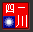
<style>
.page{position:relative;width:33px;height:32px;background:#f20000}
.page>*{position:absolute;margin:0}
.t1{font:10.4px "SimSun";color:#ffffff}
.t2{font:11.7px "SimSun";color:#ffffff}
</style>
<div class="page">
<p class="t1" style="left:6px;top:4px;width:19px;height:9px">四一</p>
<p class="t2" style="left:16px;top:15px;width:11px;height:12px">川</p>
</div>
